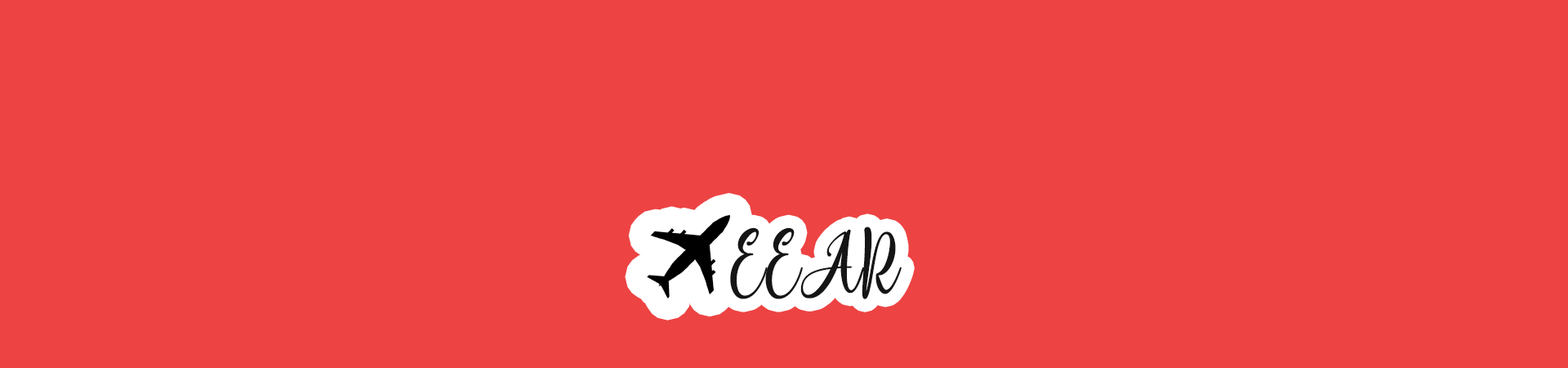
<style>
.page{position:relative;width:1568px;height:368px;background:#ed4343}
.page>*{position:absolute;margin:0}
.t1{font:82px "betterPersonalUse";color:#151515}
</style>
<div class="page">
<p class="t1" style="left:730px;top:226px;width:172px;height:73px">EEAR</p>
</div>
